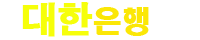
<style>
.page{position:relative;width:200px;height:40px;background:#ffffff}
.page>*{position:absolute;margin:0}
.t1{font:36px "H2gtrE";letter-spacing:-0.025em;color:#f6ff0a;font-weight:bold}
.t2{font:30px "HeadlineR-HM";letter-spacing:-0.025em;color:#fbe706}
</style>
<div class="page">
<p class="t1" style="left:22px;top:2px;width:127px;height:35px">대한<span class="t2">은행</span></p>
</div>
